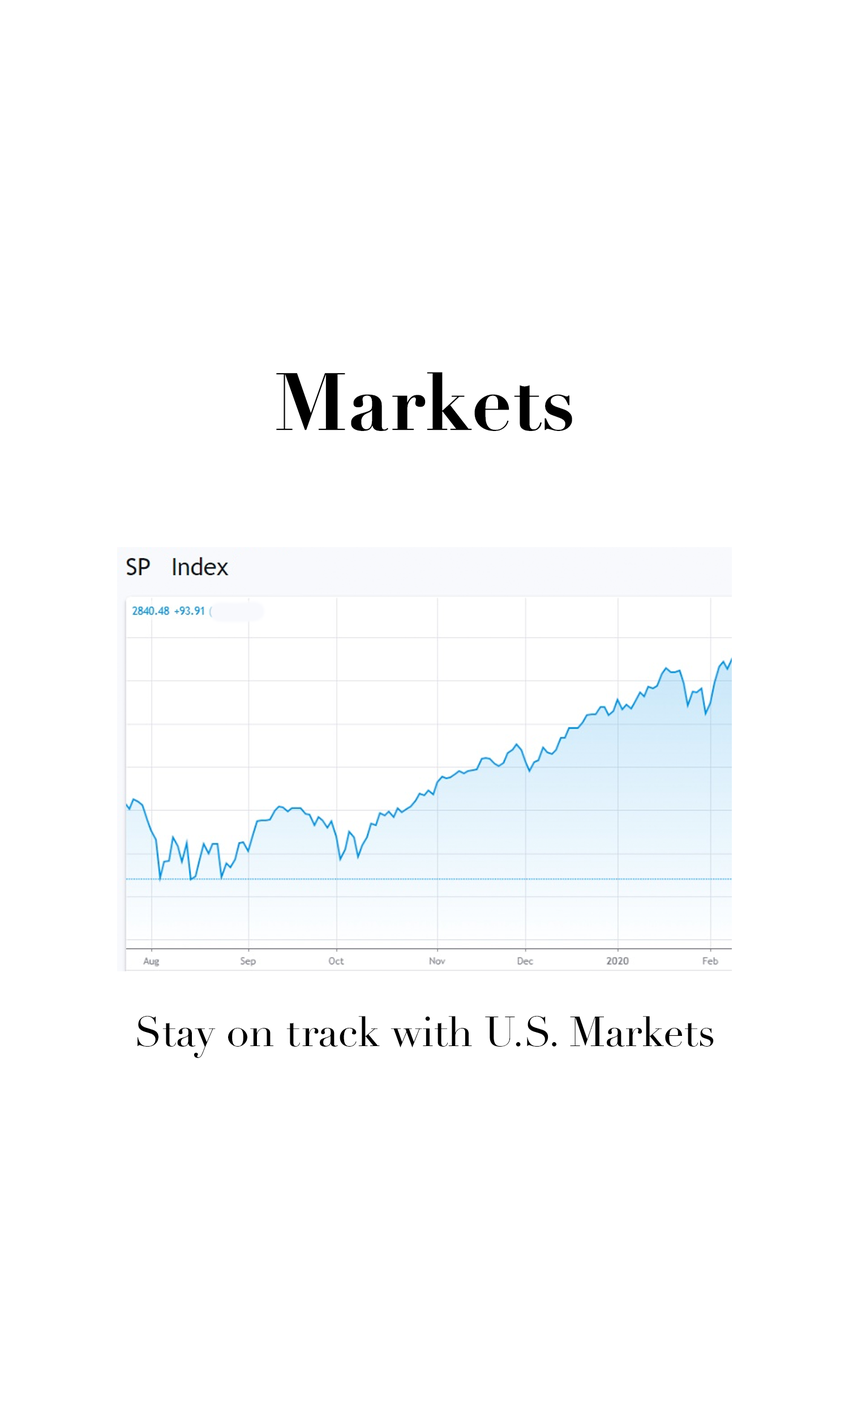
<style>
.page{position:relative;width:849px;height:1404px;background:#ffffff}
.page>*{position:absolute;margin:0}
.t1{font:79.8px "Didot-Bold";color:#000000}
.t2{font:41.3px "Didot";color:#000000}
</style>
<div class="page">
<p class="t1" style="left:276px;top:372px;width:297px;height:59px">Markets</p>
<p class="t2" style="left:138px;top:1015px;width:576px;height:43px">Stay on track with U.S. Markets</p>
</div>
